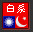
<style>
.page{position:relative;width:33px;height:32px;background:#f20000}
.page>*{position:absolute;margin:0}
.t1{font:10.4px "SimSun";color:#ffffff}
</style>
<div class="page">
<p class="t1" style="left:7px;top:4px;width:18px;height:9px">白系</p>
</div>
